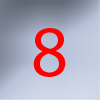
<style>
.page{position:relative;width:100px;height:100px}
.page>*{position:absolute;margin:0}
.t1{font:72px "MyriadPro-Regular";color:#ff0000}
</style>
<div class="page">
<p class="t1" style="left:33px;top:28px;width:33px;height:49px">8</p>
</div>
